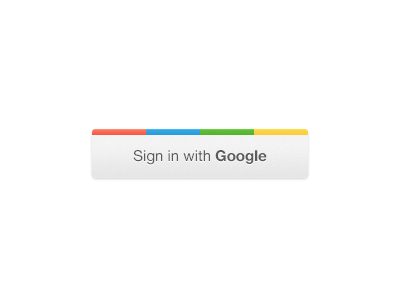
<style>
.page{position:relative;width:400px;height:300px;background:#ffffff}
.page>*{position:absolute;margin:0}
.t1{font:15px "HelveticaNeue";color:#5b5b5b}
.t2{font:15px "HelveticaNeue-Bold";color:#5b5b5b}
</style>
<div class="page">
<p class="t1" style="left:133px;top:150px;width:134px;height:15px">Sign in with<span class="t2"> Google</span></p>
</div>
